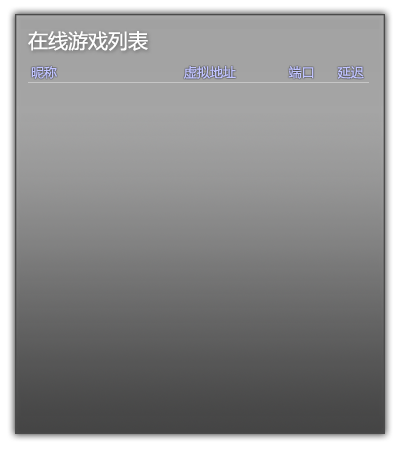
<style>
.page{position:relative;width:400px;height:450px}
.page>*{position:absolute;margin:0}
.t1{font:20px "MicrosoftYaHei";color:#fefefe}
.t2{font:13px "MicrosoftYaHei";color:#c2c5ff}
</style>
<div class="page">
<p class="t1" style="left:28px;top:31px;width:120px;height:20px">在线游戏列表</p>
<p class="t2" style="left:31px;top:66px;width:333px;height:13px">昵称                                 虚拟地址              端口      延迟</p>
</div>
